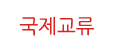
<style>
.page{position:relative;width:120px;height:53px;background:#ffffff}
.page>*{position:absolute;margin:0}
.t1{font:19.9px "NanumGothic";color:#dc241f}
</style>
<div class="page">
<p class="t1" style="left:19px;top:16px;width:75px;height:20px">국제교류</p>
</div>
